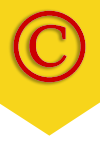
<style>
.page{position:relative;width:100px;height:141px;background:#f7d51b}
.page>*{position:absolute;margin:0}
.t1{font:100px "BookAntiqua-Italic";color:#cc0000}
</style>
<div class="page">
<p class="t1" style="left:13px;top:10px;width:73px;height:73px">©</p>
</div>
